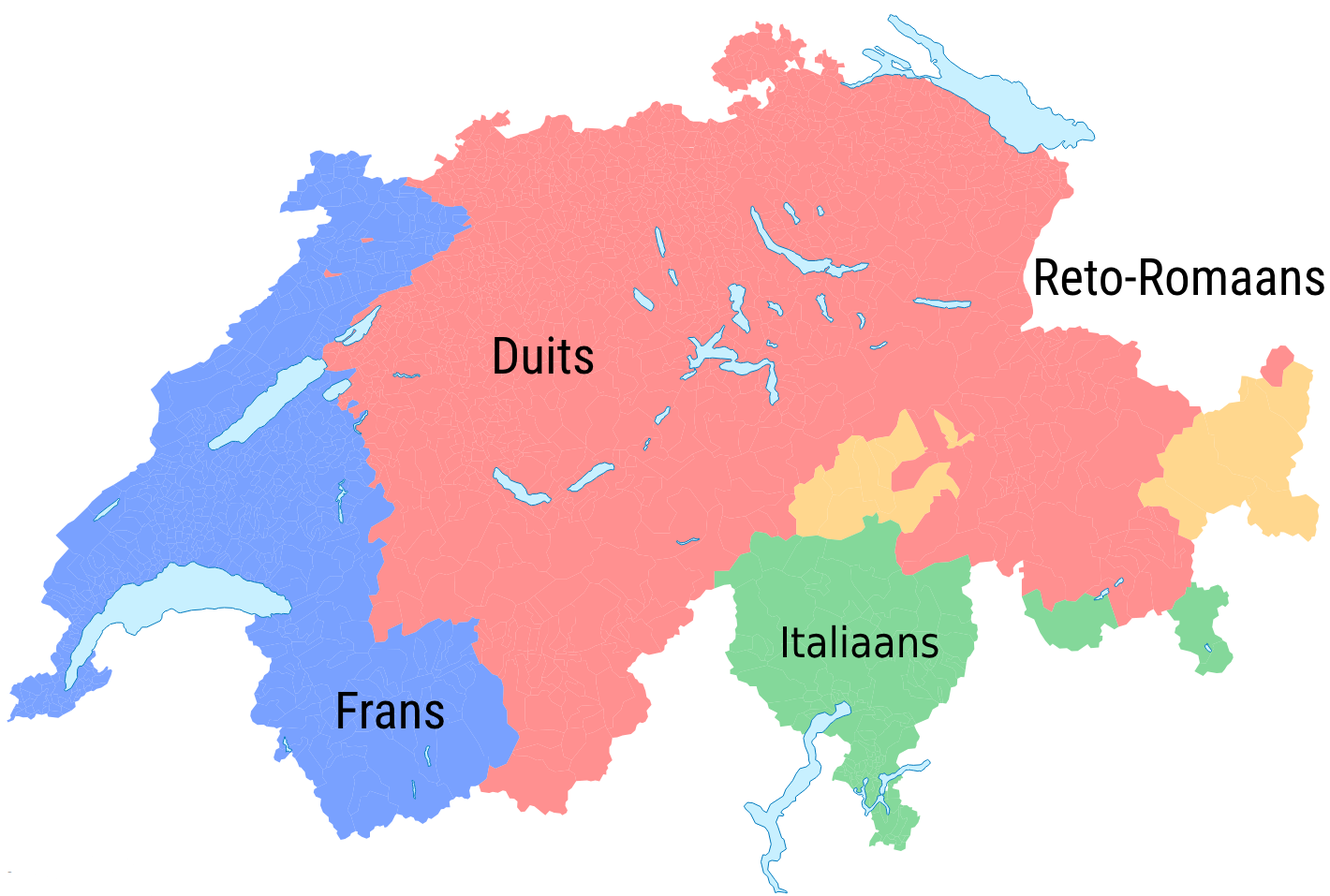
<style>
.page{position:relative;width:1330px;height:896px;background:#ffffff}
.page>*{position:absolute;margin:0}
.t1{font:51.5px "RobotoCondensed-Regular";color:#000000}
.t2{font:42.2px "DejaVuSansCondensed";color:#000000}
.t3{font:42.2px "DejaVuSansCondensed";color:#ffffff}
</style>
<div class="page">
<p class="t1" style="left:1036px;top:258px;width:289px;height:38px">Reto-Romaans</p>
<p class="t1" style="left:495px;top:336px;width:99px;height:39px">Duits</p>
<p class="t2" style="left:782px;top:625px;width:157px;height:34px"><span class="t3">I</span>taliaans</p>
<p class="t1" style="left:338px;top:691px;width:106px;height:39px">Frans</p>
</div>
